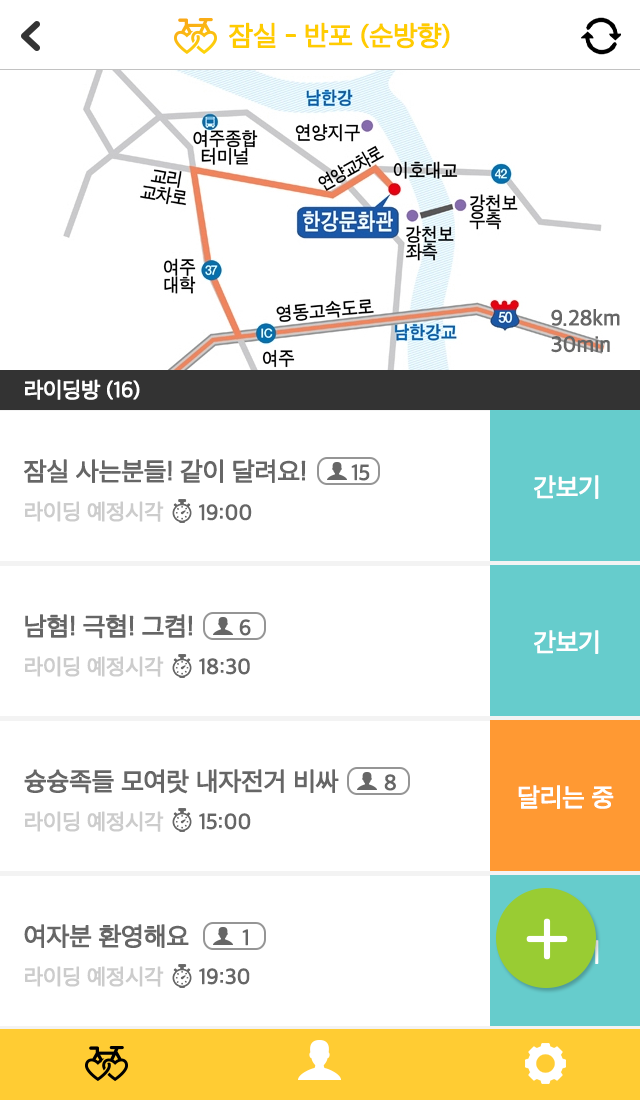
<style>
.page{position:relative;width:640px;height:1100px;background:#ffffff}
.page>*{position:absolute;margin:0}
.t1{font:28px "AppleSDGothicNeo-Regular";letter-spacing:-0.025em;color:#ffcc00;font-weight:bold}
.t2{font:22px "AppleSDGothicNeo-Regular";letter-spacing:-0.025em;color:#666666;font-weight:bold}
.t3{font:22px "AppleSDGothicNeo-Regular";letter-spacing:-0.025em;color:#ffffff;font-weight:bold}
.t4{font:26px "AppleSDGothicNeo-Regular";letter-spacing:-0.025em;color:#666666;font-weight:bold}
.t5{font:26px "AppleSDGothicNeo-Regular";letter-spacing:-0.025em;color:#ffffff;font-weight:bold}
.t6{font:22px "AppleSDGothicNeo-Regular";letter-spacing:-0.025em;color:#cccccc;font-weight:bold}
</style>
<div class="page">
<p class="t1" style="left:229px;top:22px;width:221px;height:27px">잠실 - 반포 (순방향)</p>
<p class="t2" style="left:551px;top:309px;width:69px;height:44px">9.28km<br>30min</p>
<p class="t3" style="left:25px;top:379px;width:115px;height:21px">라이딩방 (16)</p>
<p class="t4" style="left:24px;top:459px;width:282px;height:24px">잠실 사는분들! 같이 달려요!</p>
<p class="t2" style="left:351px;top:464px;width:19px;height:17px">15</p>
<p class="t5" style="left:534px;top:475px;width:65px;height:24px">간보기</p>
<p class="t6" style="left:25px;top:501px;width:139px;height:21px">라이딩 예정시각</p>
<p class="t2" style="left:199px;top:504px;width:53px;height:17px">19:00</p>
<p class="t4" style="left:25px;top:614px;width:167px;height:25px">남혐! 극혐! 그켬!</p>
<p class="t2" style="left:239px;top:619px;width:12px;height:17px">6</p>
<p class="t5" style="left:534px;top:630px;width:65px;height:24px">간보기</p>
<p class="t6" style="left:25px;top:656px;width:225px;height:21px">라이딩 예정시각      <span class="t2">18:30</span></p>
<p class="t4" style="left:24px;top:769px;width:315px;height:25px">슝슝족들 모여랏 내자전거 비싸</p>
<p class="t2" style="left:384px;top:774px;width:12px;height:17px">8</p>
<p class="t5" style="left:518px;top:785px;width:96px;height:24px">달리는 중</p>
<p class="t6" style="left:25px;top:811px;width:226px;height:21px">라이딩 예정시각      <span class="t2">15:00</span></p>
<p class="t4" style="left:24px;top:924px;width:165px;height:24px">여자분 환영해요</p>
<p class="t2" style="left:242px;top:929px;width:6px;height:17px">1</p>
<p class="t6" style="left:25px;top:966px;width:225px;height:21px">라이딩 예정시각      <span class="t2">19:30</span></p>
</div>
